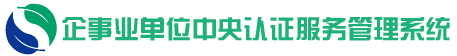
<style>
.page{position:relative;width:457px;height:56px;background:#ffffff}
.page>*{position:absolute;margin:0}
.t1{font:26px "FZZYJW--GB1-0";color:#1fb179}
</style>
<div class="page">
<p class="t1" style="left:62px;top:17px;width:388px;height:24px">企事业单位中央认证服务管理系统</p>
</div>
